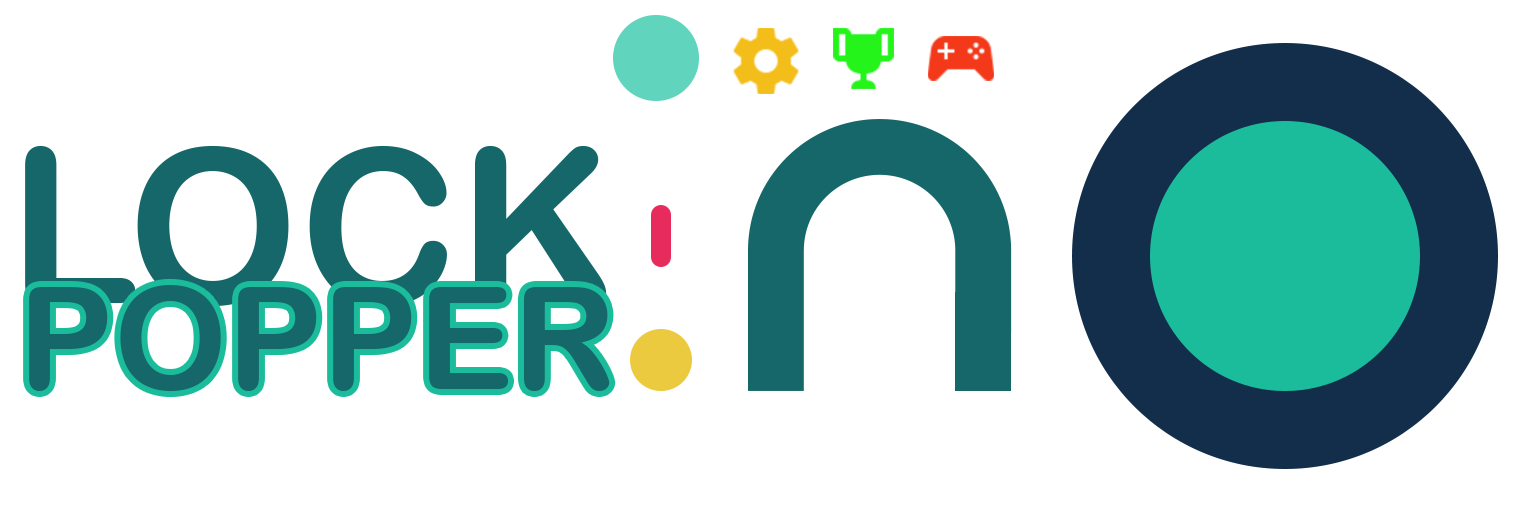
<style>
.page{position:relative;width:1536px;height:512px;background:#ffffff}
.page>*{position:absolute;margin:0}
.t1{font:215px "ArialRoundedMTBold";color:#156769}
.t2{font:143px "ArialRoundedMTBold";color:#156769}
</style>
<div class="page">
<p class="t1" style="left:25px;top:146px;width:582px;height:160px">LOCK</p>
<p class="t2" style="left:29px;top:285px;width:581px;height:106px">POPPER</p>
</div>
